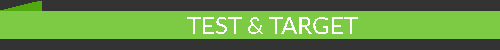
<style>
.page{position:relative;width:500px;height:50px;background:#7dcb44}
.page>*{position:absolute;margin:0}
.t1{font:24px "Lato-Regular";color:#fefefe;text-transform:uppercase}
</style>
<div class="page">
<p class="t1" style="left:187px;top:17px;width:171px;height:17px">Test &amp; Target</p>
</div>
